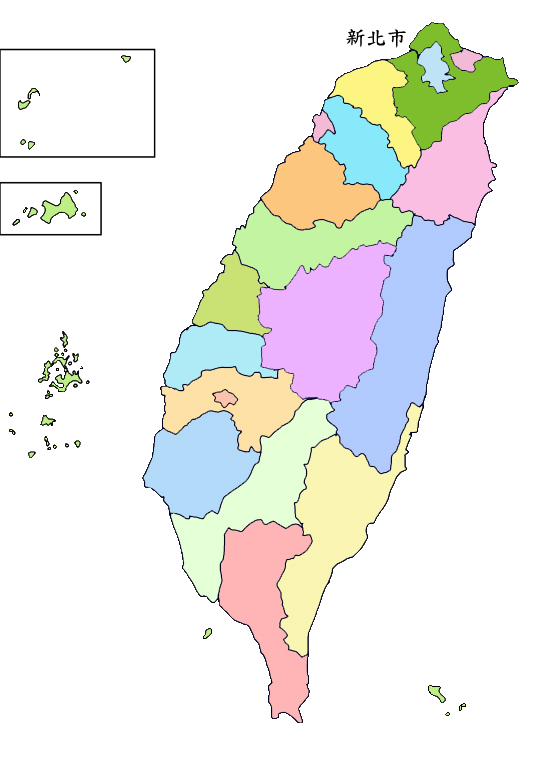
<style>
.page{position:relative;width:545px;height:768px;background:#ffffff}
.page>*{position:absolute;margin:0}
.t1{font:20.8px "DFKaiShu-SB-Estd-BF";color:#000000}
</style>
<div class="page">
<p class="t1" style="left:346px;top:29px;width:60px;height:19px">新北市</p>
</div>
